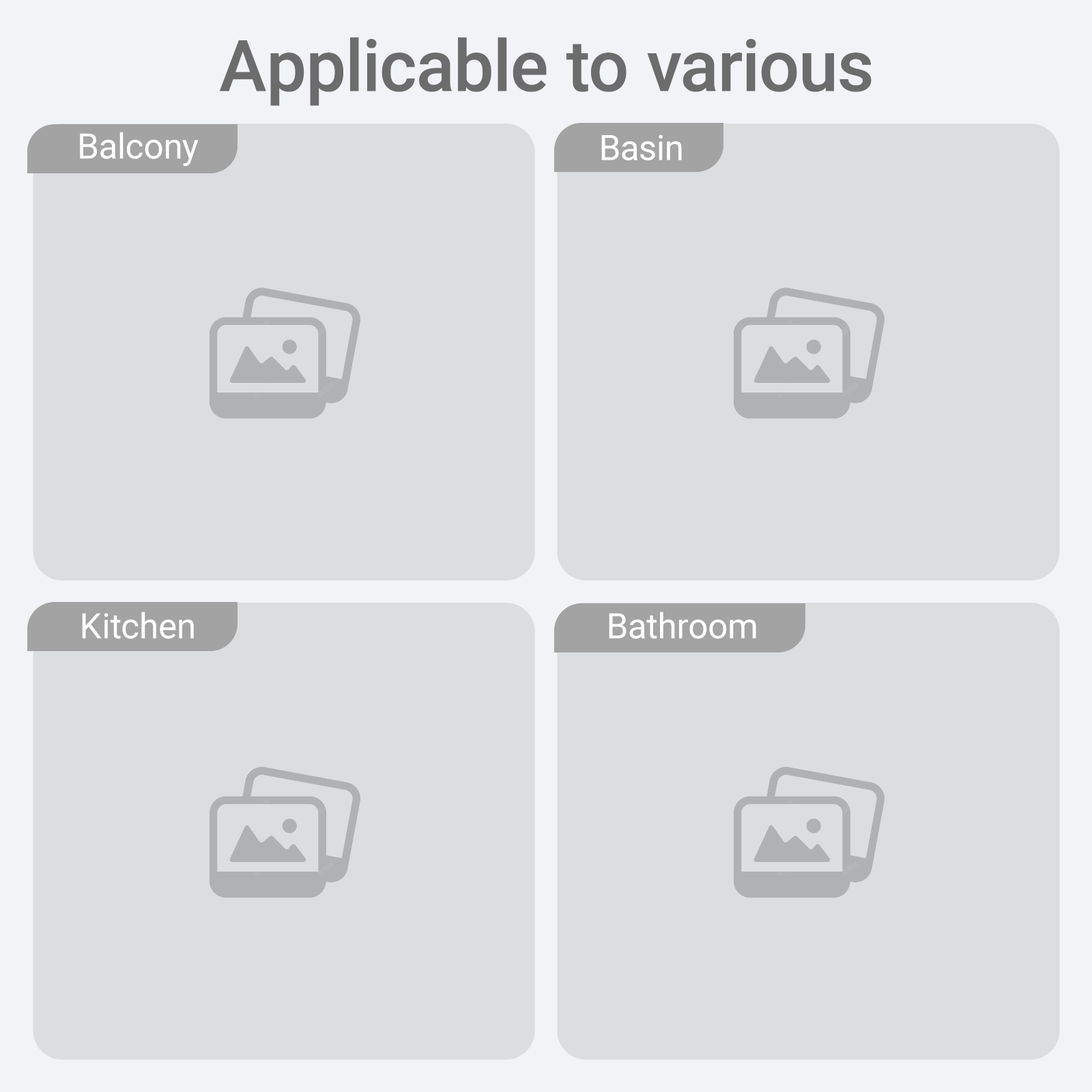
<style>
.page{position:relative;width:1092px;height:1092px;background:#dcdddf}
.page>*{position:absolute;margin:0}
.t1{font:71.3px "Roboto-Medium";color:#6c6c6c}
.t2{font:34.9px "Roboto-Regular";color:#ffffff}
</style>
<div class="page">
<p class="t1" style="left:219px;top:37px;width:653px;height:69px">Applicable to various</p>
<p class="t2" style="left:80px;top:132px;width:119px;height:35px">Balcony</p>
<p class="t2" style="left:601px;top:134px;width:81px;height:26px">Basin</p>
<p class="t2" style="left:82px;top:612px;width:112px;height:27px">Kitchen</p>
<p class="t2" style="left:609px;top:612px;width:147px;height:27px">Bathroom</p>
</div>
